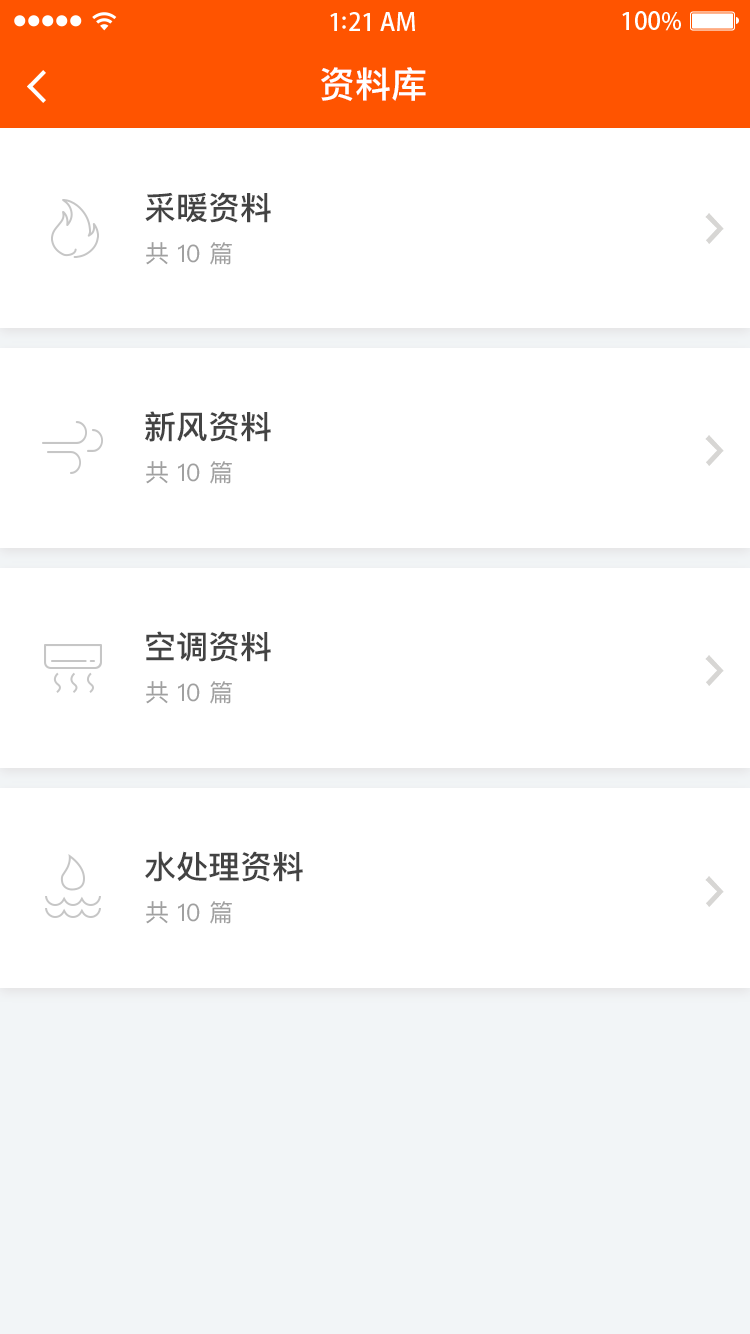
<style>
.page{position:relative;width:750px;height:1334px;background:#ffffff}
.page>*{position:absolute;margin:0}
.t1{font:36px "PingFangSC-Medium";color:#ffffff}
.t2{font:32px "PingFangSC-Medium";color:#434343}
.t3{font:24px "PingFangSC-Regular";color:#a0a0a0}
</style>
<div class="page">
<p class="t1" style="left:321px;top:67px;width:105px;height:34px">资料库</p>
<p class="t2" style="left:145px;top:192px;width:126px;height:31px">采暖资料</p>
<p class="t3" style="left:146px;top:242px;width:86px;height:23px">共 10 篇</p>
<p class="t2" style="left:145px;top:411px;width:126px;height:31px">新风资料</p>
<p class="t3" style="left:146px;top:461px;width:86px;height:23px">共 10 篇</p>
<p class="t2" style="left:146px;top:631px;width:125px;height:31px">空调资料</p>
<p class="t3" style="left:146px;top:681px;width:86px;height:23px">共 10 篇</p>
<p class="t2" style="left:145px;top:851px;width:158px;height:31px">水处理资料</p>
<p class="t3" style="left:146px;top:901px;width:86px;height:23px">共 10 篇</p>
</div>
